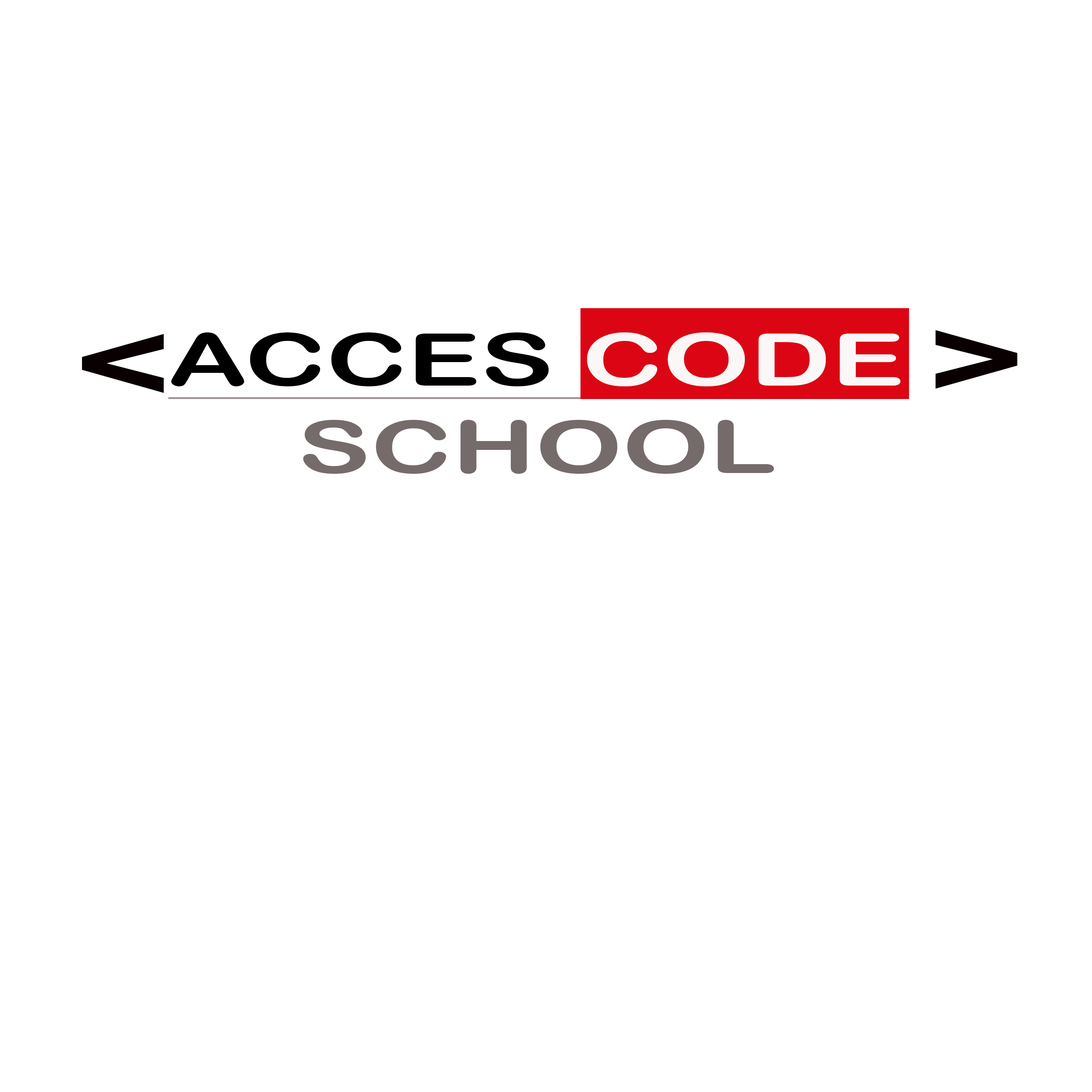
<style>
.page{position:relative;width:1092px;height:1092px;background:#ffffff}
.page>*{position:absolute;margin:0}
.t1{font:108.2px "ArialRoundedMTBold";color:#080001;scale:1.54 1}
.t2{font:72.9px "ArialRoundedMTBold";color:#000000;scale:1.51 1}
.t3{font:72.9px "ArialRoundedMTBold";scale:1.51 1}
.t4{font:72.9px "ArialRoundedMTBold";color:#766b6b;scale:1.51 1}
</style>
<div class="page">
<p class="t1" style="left:82px;top:334px;width:82px;height:59px">&lt;</p>
<p class="t2" style="left:171px;top:332px;width:378px;height:54px">ACCES</p>
<p class="t3" style="left:171px;top:332px;width:730px;height:142px;text-align:center">ACCES CODE<br>SCHOOL</p>
<p class="t1" style="left:935px;top:330px;width:83px;height:59px">&gt;</p>
<p class="t4" style="left:303px;top:420px;width:471px;height:54px">SCHOOL</p>
</div>
